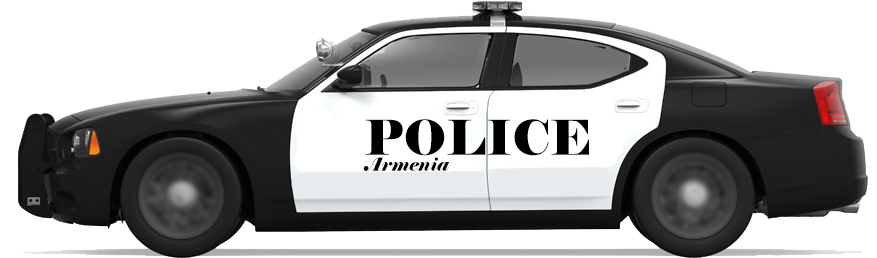
<style>
.page{position:relative;width:877px;height:258px;background:#ffffff}
.page>*{position:absolute;margin:0}
.t1{font:48px "Elephant-Regular";color:#000000}
.t2{font:18px "Elephant-Italic";color:#000000}
</style>
<div class="page">
<p class="t1" style="left:365px;top:119px;width:224px;height:37px">POLICE</p>
<p class="t2" style="left:363px;top:157px;width:86px;height:14px">Armenia</p>
</div>
